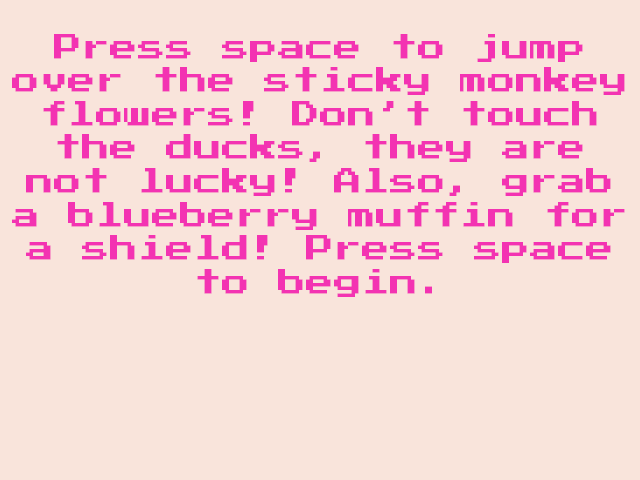
<style>
.page{position:relative;width:640px;height:480px;background:#f9e4db}
.page>*{position:absolute;margin:0}
.t1{font:28px "PressStart2P";color:#f333b2}
</style>
<div class="page">
<p class="t1" style="left:12px;top:34px;width:613px;height:263px;text-align:center">Press space to jump over the sticky monkey flowers! Don’t touch the ducks, they are not lucky! Also, grab  a blueberry muffin for   a shield! Press space to begin.</p>
</div>
